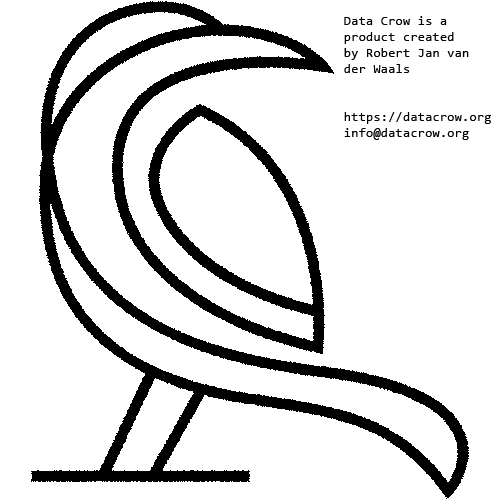
<style>
.page{position:relative;width:500px;height:500px;background:#ffffff}
.page>*{position:absolute;margin:0}
.t1{font:13.4px "Consolas";color:#000000}
</style>
<div class="page">
<p class="t1" style="left:344px;top:16px;width:147px;height:124px">Data Crow is a <br>product created<br>by Robert Jan van <br>der Waals<br><br><br>https://datacrow.org<br>info@datacrow.org</p>
</div>
